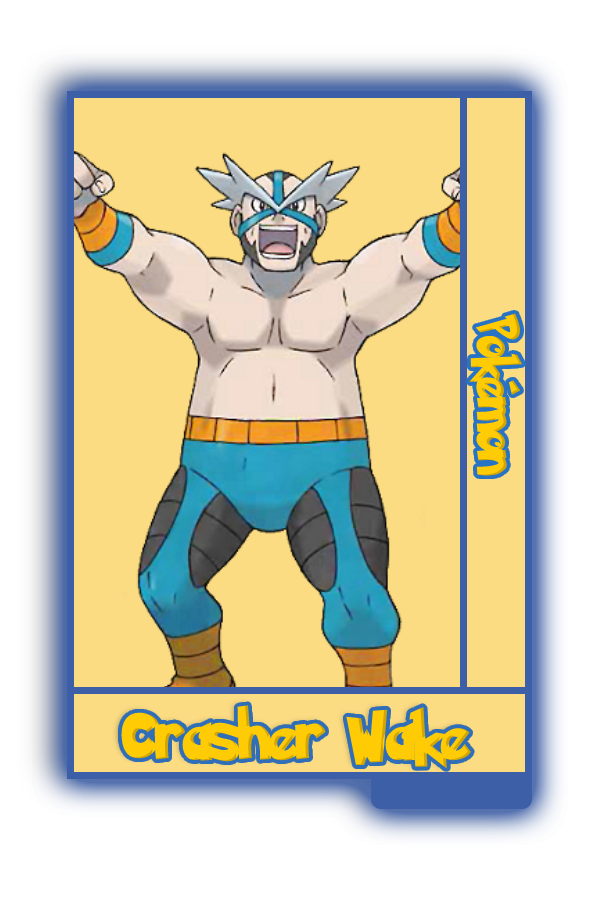
<style>
.page{position:relative;width:600px;height:900px;background:#fbdc83}
.page>*{position:absolute;margin:0}
.t1{font:48.8px "PokemonSolidNormal";color:#ffcb05;scale:0.8 1}
.t2{font:56.6px "PokemonSolidNormal";color:#ffcb05;scale:0.92 1}
</style>
<div class="page">
<p class="t1" style="left:469px;top:313px;width:54px;height:163px;rotate:90deg">Pokémon</p>
<p class="t2" style="left:121px;top:705px;width:350px;height:64px">Crasher Wake</p>
</div>
